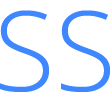
<style>
.page{position:relative;width:110px;height:110px;background:#ffffff}
.page>*{position:absolute;margin:0}
.t1{font:111.1px "OpenSans-Light";color:#3f87ff}
</style>
<div class="page">
<p class="t1" style="left:0px;top:10px;width:110px;height:82px">SS</p>
</div>
